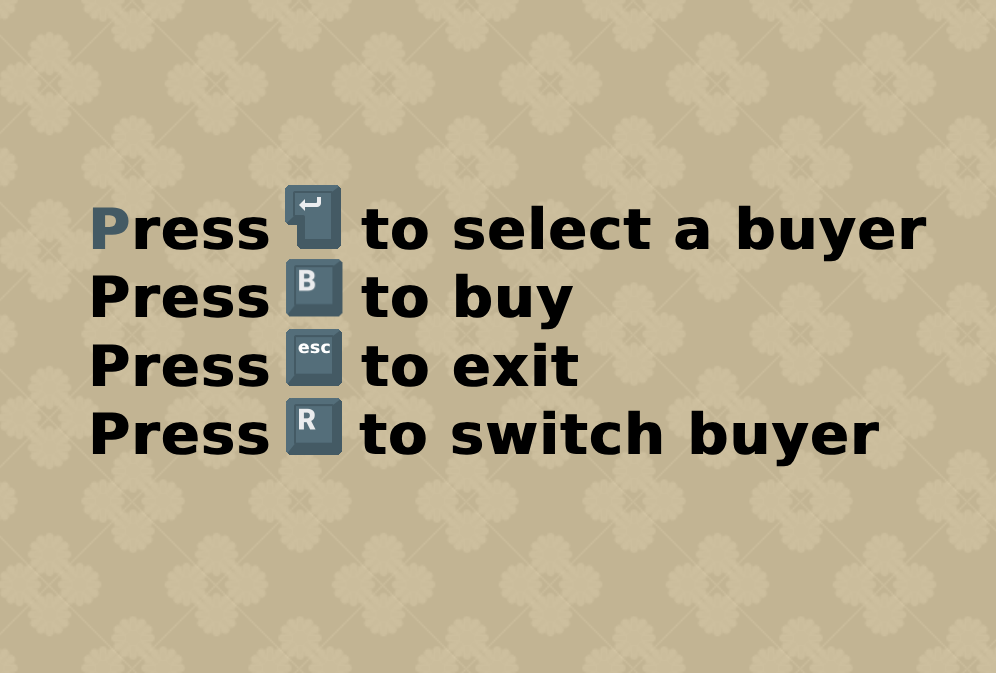
<style>
.page{position:relative;width:996px;height:673px;background:#c2b493}
.page>*{position:absolute;margin:0}
.t1{font:56.8px "DejaVuSans-Bold";color:#000000;font-weight:bold}
.t2{font:56.8px "DejaVuSans-Bold";color:#445a64;font-weight:bold}
</style>
<div class="page">
<p class="t1" style="left:92px;top:205px;width:835px;height:262px"><span class="t2">P</span>ress    to select a buyer<br>Press    to buy<br>Press    to exit <br>Press R to switch buyer</p>
</div>
